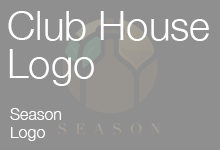
<style>
.page{position:relative;width:220px;height:150px;background:#8f8f8f}
.page>*{position:absolute;margin:0}
.t1{font:40px/38px "HelveticaNeue-Light";color:#ffffff}
.t2{font:16px/18px "HelveticaNeue-Light";color:#ffffff}
</style>
<div class="page">
<p class="t1" style="left:8px;top:11px;width:201px;height:75px">Club House<br>Logo</p>
<p class="t2" style="left:10px;top:108px;width:51px;height:33px">Season<br>Logo</p>
</div>
